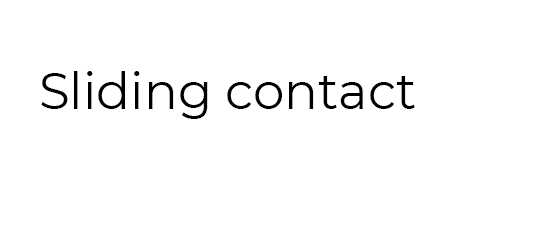
<style>
.page{position:relative;width:533px;height:244px;background:#ffffff}
.page>*{position:absolute;margin:0}
.t1{font:50px "Montserrat-Regular";color:#000000}
</style>
<div class="page">
<p class="t1" style="left:41px;top:71px;width:374px;height:48px">Sliding contact</p>
</div>
